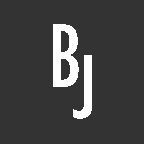
<style>
.page{position:relative;width:144px;height:144px;background:#333333}
.page>*{position:absolute;margin:0}
.t1{font:83.3px "Futura-CondensedMedium";color:#ffffff}
</style>
<div class="page">
<p class="t1" style="left:53px;top:24px;width:26px;height:63px">B</p>
<p class="t1" style="left:73px;top:55px;width:19px;height:64px">J</p>
</div>
